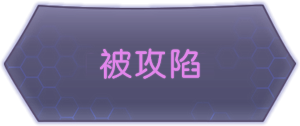
<style>
.page{position:relative;width:300px;height:126px}
.page>*{position:absolute;margin:0}
.t1{font:32px "FZY3K--GBK1-0";letter-spacing:0.08em;color:#e286eb}
</style>
<div class="page">
<p class="t1" style="left:100px;top:48px;width:100px;height:31px">被攻陷</p>
</div>
